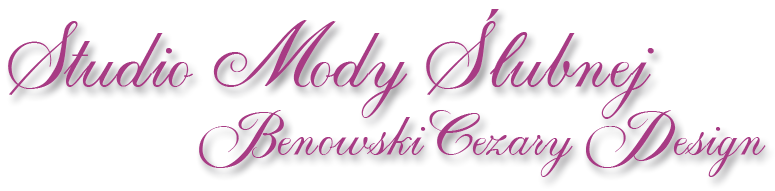
<style>
.page{position:relative;width:775px;height:191px;background:#ffffff}
.page>*{position:absolute;margin:0}
.t1{font:83.3px "EFNAbsolut";letter-spacing:0.005em;color:#a73b84}
.t2{font:58.3px "EFNAbsolut";letter-spacing:0.005em;color:#a73b84}
</style>
<div class="page">
<p class="t1" style="left:8px;top:9px;width:646px;height:110px">Studio Mody Ślubnej</p>
<p class="t2" style="left:199px;top:110px;width:567px;height:67px">Benowski Cezary Design</p>
</div>
